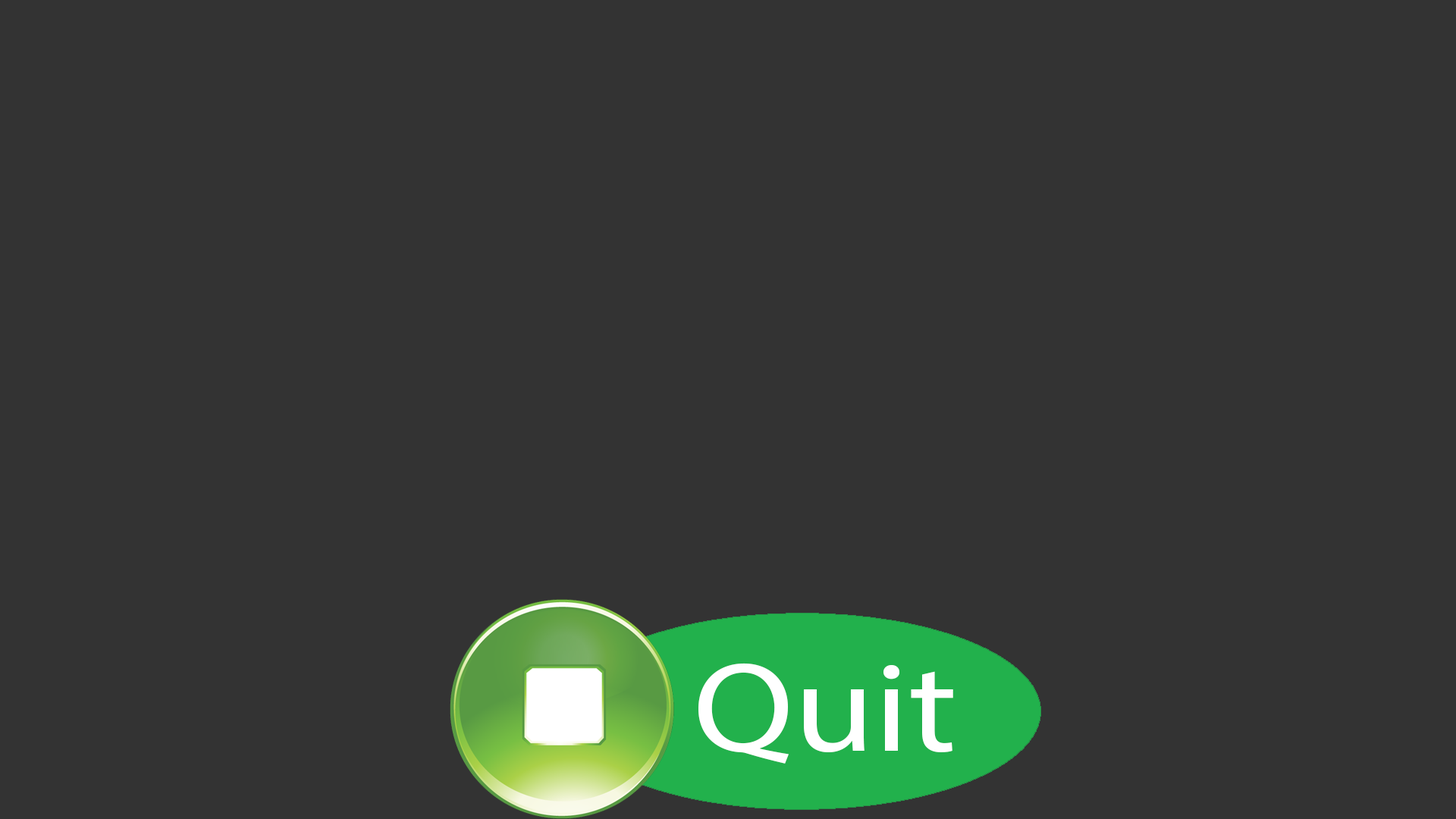
<style>
.page{position:relative;width:1456px;height:819px;background:#333333}
.page>*{position:absolute;margin:0}
.t1{font:127px "MyriadPro-Regular";color:#ffffff;scale:1.15 1}
</style>
<div class="page">
<p class="t1" style="left:698px;top:663px;width:255px;height:101px">Quit</p>
</div>
